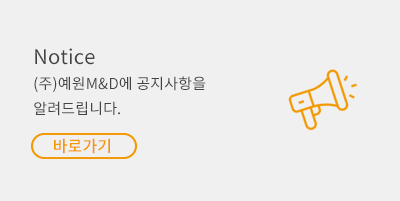
<style>
.page{position:relative;width:400px;height:201px;background:#f0f0f0}
.page>*{position:absolute;margin:0}
.t1{font:15px/25px "NotoSansCJKkr-Regular";letter-spacing:0.01em;color:#434343}
.t2{font:20px/35.5px "NotoSansCJKkr-Regular";letter-spacing:0.01em;color:#434343}
.t3{font:16px "NotoSansCJKkr-Medium";letter-spacing:0.01em;color:#f39800}
</style>
<div class="page">
<p class="t1" style="left:34px;top:48px;width:172px;height:68px"><span class="t2">Notice<br></span>(주)예원M&amp;D에 공지사항을 알려드립니다.</p>
<p class="t3" style="left:54px;top:138px;width:56px;height:16px">바로가기</p>
</div>
